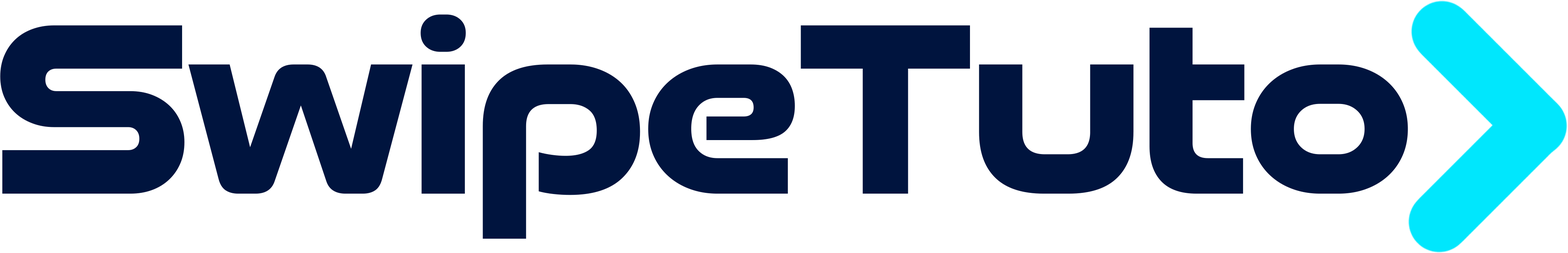
<style>
.page{position:relative;width:1568px;height:253px;background:#ffffff}
.page>*{position:absolute;margin:0}
.t1{font:258.9px "GoodTimingRg-Bold";letter-spacing:-0.025em;color:#00143e}
</style>
<div class="page">
<p class="t1" style="left:0px;top:14px;width:1408px;height:225px">SwipeTuto</p>
</div>
